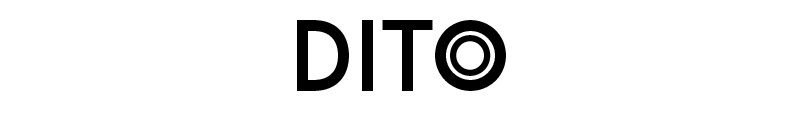
<style>
.page{position:relative;width:800px;height:120px;background:#ffffff}
.page>*{position:absolute;margin:0}
.t1{font:95.7px "ADAM.CGPRO";color:#000000}
.t2{font:54.7px "ADAM.CGPRO";color:#000000}
</style>
<div class="page">
<p class="t1" style="left:297px;top:20px;width:209px;height:71px">Dito</p>
<p class="t2" style="left:450px;top:35px;width:41px;height:41px">O</p>
</div>
